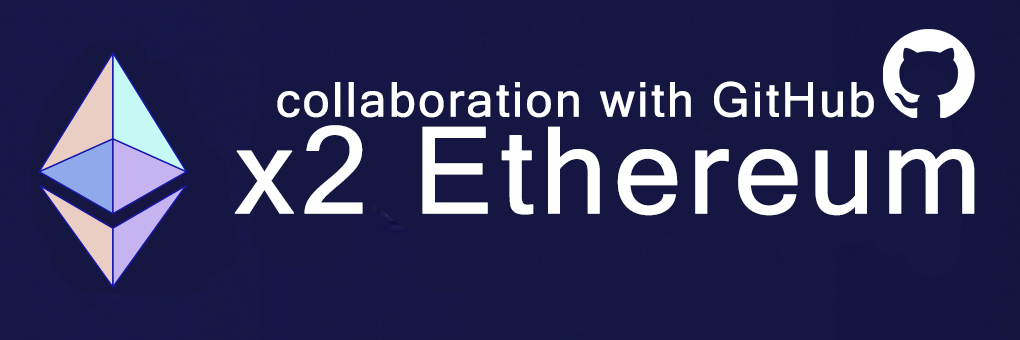
<style>
.page{position:relative;width:1020px;height:340px;background:#151742}
.page>*{position:absolute;margin:0}
.t1{font:48px "MicrosoftSansSerif";letter-spacing:0.03em;color:#ffffff;font-weight:bold}
.t2{font:120px "MicrosoftSansSerif";letter-spacing:0.03em;color:#ffffff;font-weight:bold}
</style>
<div class="page">
<p class="t1" style="left:277px;top:81px;width:597px;height:37px">collaboration with GitHub</p>
<p class="t2" style="left:234px;top:125px;width:741px;height:91px">x2 Ethereum</p>
</div>
